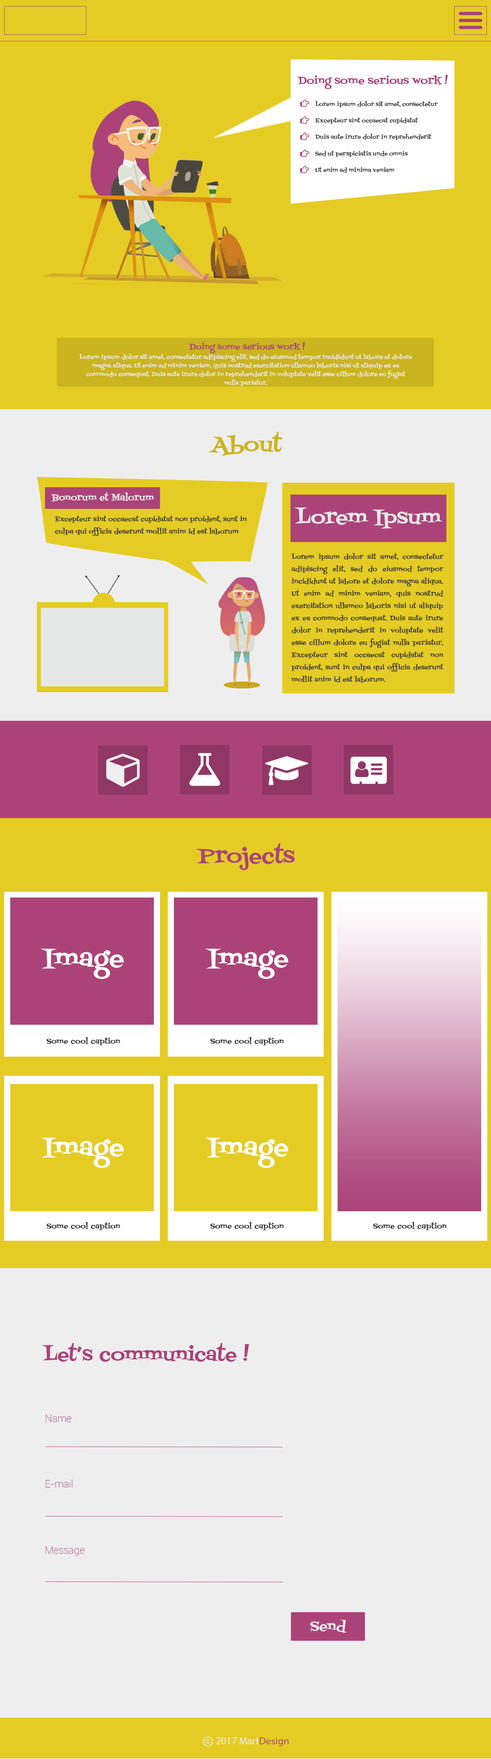
<style>
.page{position:relative;width:491px;height:1759px;background:#eeeeee}
.page>*{position:absolute;margin:0}
.t1{font:10.6px "FontdinerSwanky";color:#ab4379}
.t2{font:5.7px "FontdinerSwanky";color:#2e2e2e}
.t3{font:5.7px/8.6px "FontdinerSwanky";color:#eeeeee}
.t4{font:8.2px "FontdinerSwanky";color:#ab4379}
.t5{font:21.7px "FontdinerSwanky";color:#cab420}
.t6{font:9px "FontdinerSwanky";color:#eeeeee}
.t7{font:20.5px "FontdinerSwanky";color:#e6e8e7}
.t8{font:6.5px/12.3px "FontdinerSwanky";color:#363636}
.t9{font:21.7px "FontdinerSwanky";color:#ab4379}
.t10{font:25.5px "FontdinerSwanky";color:#ffffff}
.t11{font:7.4px "FontdinerSwanky";color:#2e2e2e}
.t12{font:19.6px "FontdinerSwanky";color:#ab4379}
.t13{font:10.2px "Roboto-Thin";color:#ab4379}
.t14{font:13.9px "FontdinerSwanky";color:#eeeeee}
.t15{font:10.2px "MyriadPro-Regular";color:#eeeeee}
.t16{font:10.2px "MyriadPro-Regular";color:#ab4379}
</style>
<div class="page">
<p class="t1" style="left:296px;top:75px;width:152px;height:14px">Doing some serious work !</p>
<p class="t2" style="left:314px;top:101px;width:124px;height:7px">Lorem ipsum dolor sit amet, consectetur</p>
<p class="t2" style="left:314px;top:117px;width:104px;height:7px">Excepteur sint occaecat cupidatat</p>
<p class="t2" style="left:314px;top:133px;width:118px;height:7px">Duis aute irure dolor in reprehenderit</p>
<p class="t2" style="left:315px;top:150px;width:93px;height:7px">Sed ut perspiciatis unde omnis</p>
<p class="t2" style="left:314px;top:167px;width:81px;height:6px">Ut enim ad minima veniam</p>
<p class="t3" style="left:79px;top:353px;width:333px;height:33px;text-align:center">Lorem ipsum dolor sit amet, consectetur adipiscing elit, sed do eiusmod tempor incididunt ut labore et dolore magna aliqua. Ut enim ad minim veniam, quis nostrud exercitation ullamco laboris nisi ut aliquip ex ea commodo consequat. Duis aute irure dolor in reprehenderit in voluptate velit esse cillum dolore eu fugiat nulla pariatur.</p>
<p class="t4" style="left:188px;top:342px;width:117px;height:11px">Doing some serious work !</p>
<p class="t5" style="left:208px;top:432px;width:74px;height:24px">About</p>
<p class="t6" style="left:51px;top:492px;width:104px;height:10px">Bonorum et Malorum</p>
<p class="t7" style="left:294px;top:507px;width:149px;height:22px">Lorem Ipsum</p>
<p class="t8" style="left:54px;top:515px;width:193px;height:21px;text-align:justify">Excepteur sint occaecat cupidatat non proident, sunt in <br>culpa qui officia deserunt mollit anim id est laborum</p>
<p class="t8" style="left:290px;top:553px;width:154px;height:130px;text-align:justify">Lorem ipsum dolor sit amet, consectetur adipiscing elit, sed do eiusmod tempor incididunt ut labore et dolore magna aliqua. Ut enim ad minim veniam, quis nostrud exercitation ullamco laboris nisi ut aliquip ex ea commodo consequat. Duis aute irure dolor in reprehenderit in voluptate velit esse cillum dolore eu fugiat nulla pariatur. Excepteur sint occaecat cupidatat non proident, sunt in culpa qui officia deserunt mollit anim id est laborum.</p>
<p class="t9" style="left:196px;top:843px;width:99px;height:27px">Projects</p>
<p class="t10" style="left:41px;top:949px;width:83px;height:30px">Image</p>
<p class="t10" style="left:205px;top:949px;width:83px;height:30px">Image</p>
<p class="t11" style="left:47px;top:1037px;width:74px;height:9px">Some cool caption</p>
<p class="t11" style="left:210px;top:1037px;width:74px;height:9px">Some cool caption</p>
<p class="t10" style="left:41px;top:1138px;width:83px;height:30px">Image</p>
<p class="t10" style="left:205px;top:1138px;width:83px;height:30px">Image</p>
<p class="t11" style="left:47px;top:1222px;width:74px;height:9px">Some cool caption</p>
<p class="t11" style="left:210px;top:1222px;width:74px;height:9px">Some cool caption</p>
<p class="t11" style="left:373px;top:1222px;width:74px;height:9px">Some cool caption</p>
<p class="t12" style="left:41px;top:1343px;width:208px;height:19px">Let’s communicate !</p>
<p class="t13" style="left:45px;top:1415px;width:27px;height:7px">Name</p>
<p class="t13" style="left:45px;top:1479px;width:27px;height:9px">E-mail</p>
<p class="t13" style="left:45px;top:1546px;width:40px;height:10px">Message</p>
<p class="t14" style="left:310px;top:1620px;width:37px;height:13px">Send</p>
<p class="t15" style="left:216px;top:1737px;width:73px;height:9px">2017 Mart<span class="t16">Design</span></p>
</div>
